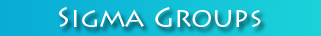
<style>
.page{position:relative;width:321px;height:36px}
.page>*{position:absolute;margin:0}
.t1{font:28px "LithosPro-Regular";color:#ffffff}
</style>
<div class="page">
<p class="t1" style="left:59px;top:7px;width:202px;height:20px">Sigma Groups</p>
</div>
